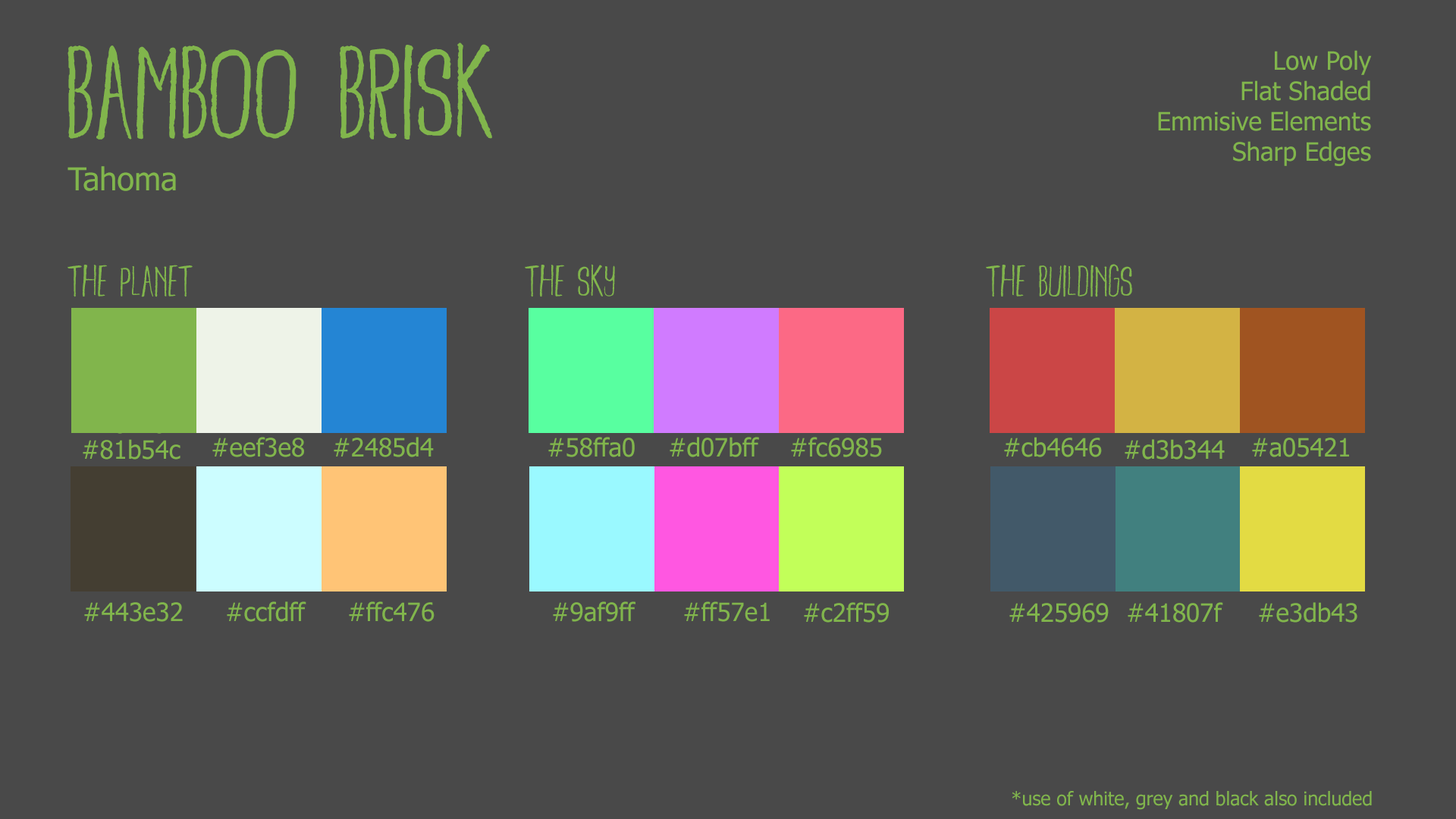
<style>
.page{position:relative;width:1456px;height:819px;background:#494949}
.page>*{position:absolute;margin:0}
.t1{font:113.7px "BambooBrisk-Regular";color:#81b54c}
.t2{font:25.3px "Tahoma";color:#81b54c}
.t3{font:31.6px "Tahoma";color:#81b54c}
.t4{font:37.9px "BambooBrisk-Regular";color:#81b54c}
.t5{font:19px "Tahoma";color:#81b54c}
</style>
<div class="page">
<p class="t1" style="left:67px;top:42px;width:425px;height:98px">Bamboo Brisk</p>
<p class="t2" style="left:1158px;top:50px;width:214px;height:116px;text-align:right">Low Poly<br>Flat Shaded<br>Emmisive Elements<br>Sharp Edges</p>
<p class="t3" style="left:67px;top:166px;width:109px;height:25px">Tahoma</p>
<p class="t4" style="left:67px;top:265px;width:126px;height:32px">The Planet</p>
<p class="t4" style="left:525px;top:264px;width:90px;height:33px">The Sky</p>
<p class="t4" style="left:986px;top:264px;width:146px;height:33px">The Buildings</p>
<p class="t2" style="left:212px;top:437px;width:92px;height:20px">#eef3e8</p>
<p class="t2" style="left:334px;top:437px;width:100px;height:20px">#2485d4</p>
<p class="t2" style="left:548px;top:437px;width:87px;height:20px">#58ffa0</p>
<p class="t2" style="left:670px;top:437px;width:89px;height:20px">#d07bff</p>
<p class="t2" style="left:791px;top:437px;width:91px;height:20px">#fc6985</p>
<p class="t2" style="left:1004px;top:437px;width:98px;height:20px">#cb4646</p>
<p class="t2" style="left:1252px;top:438px;width:97px;height:19px">#a05421</p>
<p class="t2" style="left:83px;top:439px;width:97px;height:21px">#81b54c</p>
<p class="t2" style="left:1125px;top:439px;width:100px;height:21px">#d3b344</p>
<p class="t2" style="left:84px;top:602px;width:99px;height:20px">#443e32</p>
<p class="t2" style="left:227px;top:601px;width:79px;height:21px">#ccfdff</p>
<p class="t2" style="left:349px;top:601px;width:86px;height:21px">#ffc476</p>
<p class="t2" style="left:553px;top:601px;width:82px;height:21px">#9af9ff</p>
<p class="t2" style="left:804px;top:602px;width:85px;height:21px">#c2ff59</p>
<p class="t2" style="left:1009px;top:603px;width:100px;height:20px">#425969</p>
<p class="t2" style="left:1128px;top:602px;width:95px;height:21px">#41807f</p>
<p class="t2" style="left:1259px;top:602px;width:98px;height:21px">#e3db43</p>
<p class="t5" style="left:1012px;top:791px;width:360px;height:19px">*use of white, grey and black also included</p>
</div>
